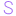
<style>
.page{position:relative;width:16px;height:16px;background:#ffffff}
.page>*{position:absolute;margin:0}
.t1{font:18.8px "TextMeOne-Regular";color:#a26af3;text-transform:uppercase;scale:1.05 1}
</style>
<div class="page">
<p class="t1" style="left:3px;top:1px;width:10px;height:14px">S</p>
</div>
